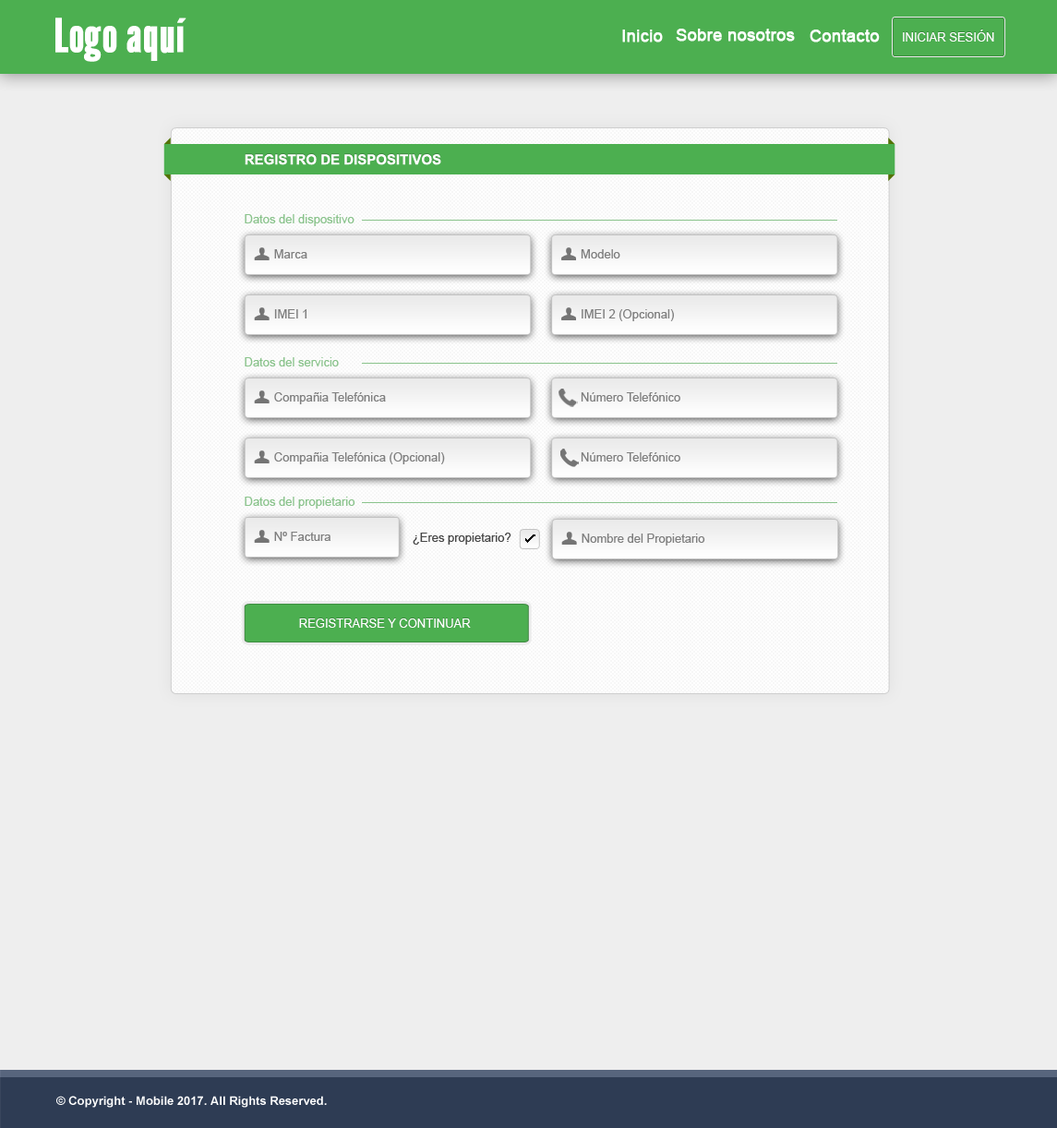
<style>
.page{position:relative;width:1057px;height:1128px;background:#eeeeee}
.page>*{position:absolute;margin:0}
.t1{font:46.2px "LeagueGothic-Regular";color:#ffffff;font-weight:bold}
.t2{font:16.6px "ArialMT";color:#ffffff;font-weight:bold}
.t3{font:12px "ArialMT";color:#ffffff;text-transform:uppercase}
.t4{font:13.8px "Arial-BoldMT";color:#ffffff;text-transform:uppercase}
.t5{font:12px "ArialMT";color:#8ac38c}
.t6{font:12px "ArialMT";color:#7e7e7e}
.t7{font:12px "ArialMT";color:#464646}
.t8{font:12px "Arial-BoldMT";color:#ffffff}
</style>
<div class="page">
<p class="t1" style="left:55px;top:18px;width:131px;height:44px">Logo aquí</p>
<p class="t2" style="left:622px;top:30px;width:41px;height:12px">Inicio</p>
<p class="t2" style="left:676px;top:29px;width:119px;height:13px">Sobre nosotros</p>
<p class="t2" style="left:810px;top:30px;width:70px;height:12px">Contacto</p>
<p class="t3" style="left:903px;top:30px;width:91px;height:12px">Iniciar Sesión</p>
<p class="t4" style="left:245px;top:154px;width:196px;height:11px">Registro de dispositivos</p>
<p class="t5" style="left:245px;top:214px;width:109px;height:12px">Datos del dispositivo</p>
<p class="t6" style="left:274px;top:249px;width:33px;height:9px">Marca</p>
<p class="t6" style="left:581px;top:249px;width:39px;height:9px">Modelo</p>
<p class="t6" style="left:274px;top:309px;width:32px;height:9px">IMEI 1</p>
<p class="t6" style="left:582px;top:309px;width:92px;height:12px">IMEI 2 (Opcional)</p>
<p class="t5" style="left:245px;top:357px;width:94px;height:9px">Datos del servicio</p>
<p class="t6" style="left:274px;top:392px;width:112px;height:12px">Compañia Telefónica</p>
<p class="t6" style="left:581px;top:392px;width:99px;height:10px">Número Telefónico</p>
<p class="t6" style="left:274px;top:452px;width:171px;height:12px">Compañia Telefónica (Opcional)</p>
<p class="t6" style="left:581px;top:452px;width:99px;height:10px">Número Telefónico</p>
<p class="t5" style="left:245px;top:497px;width:110px;height:12px">Datos del propietario</p>
<p class="t6" style="left:274px;top:532px;width:56px;height:9px">Nº Factura</p>
<p class="t7" style="left:413px;top:533px;width:98px;height:12px">¿Eres propietario?</p>
<p class="t6" style="left:582px;top:534px;width:123px;height:12px">Nombre del Propietario</p>
<p class="t3" style="left:299px;top:619px;width:172px;height:9px">registrarse y Continuar</p>
<p class="t8" style="left:56px;top:1096px;width:271px;height:12px">© Copyright - Mobile 2017. All Rights Reserved.</p>
</div>
